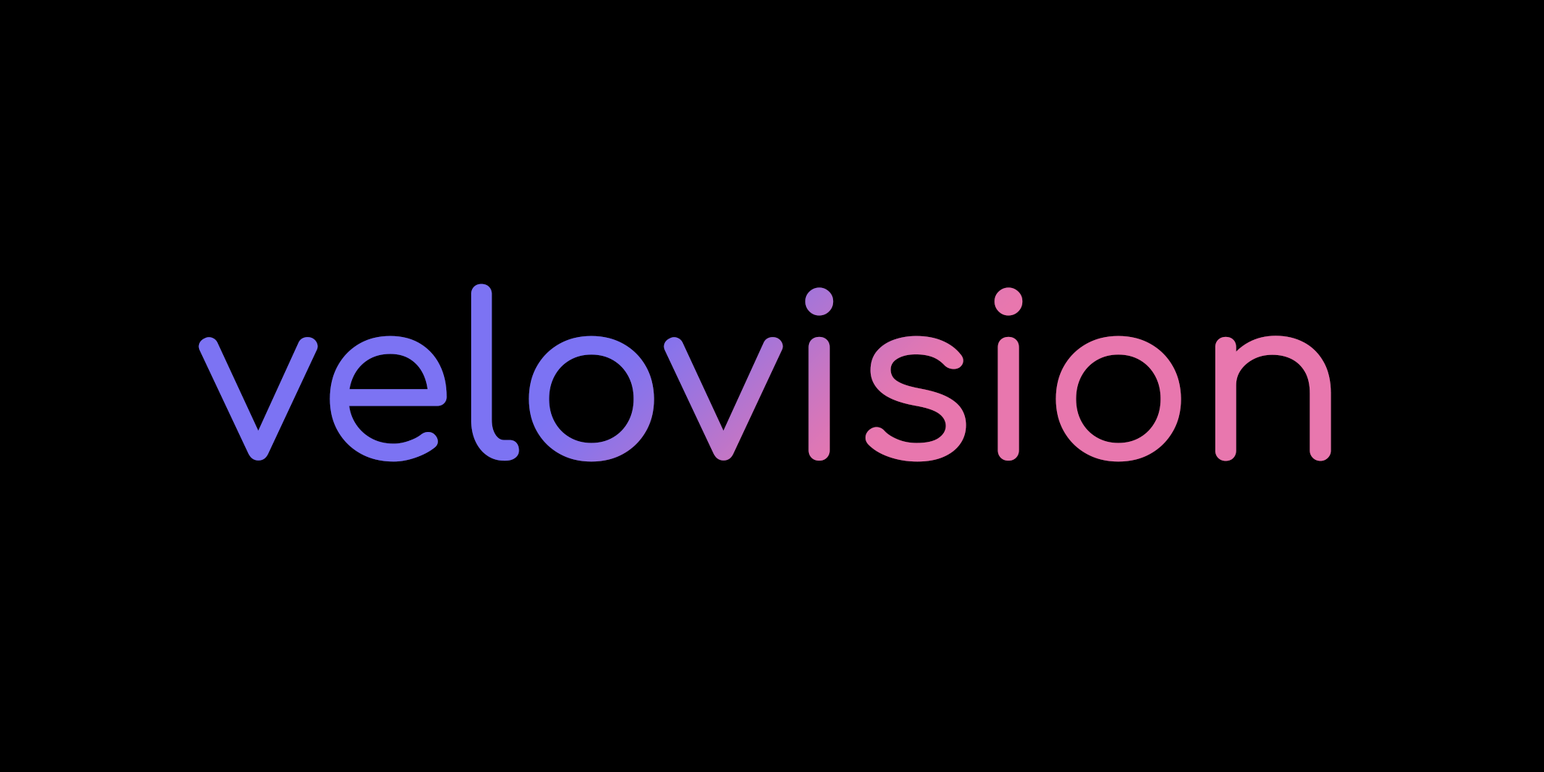
<style>
.page{position:relative;width:1544px;height:772px;background:#000000}
.page>*{position:absolute;margin:0}
.t1{font:226.2px "Comfortaa-SemiBold"}
</style>
<div class="page">
<p class="t1" style="left:198px;top:284px;width:1134px;height:178px">velovision</p>
</div>
